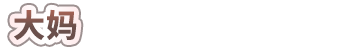
<style>
.page{position:relative;width:360px;height:50px;background:#ffffff}
.page>*{position:absolute;margin:0}
.t1{font:32px "SourceHanSansSC-Bold";color:#73534d;font-weight:bold}
</style>
<div class="page">
<p class="t1" style="left:14px;top:9px;width:63px;height:31px">大妈</p>
</div>
